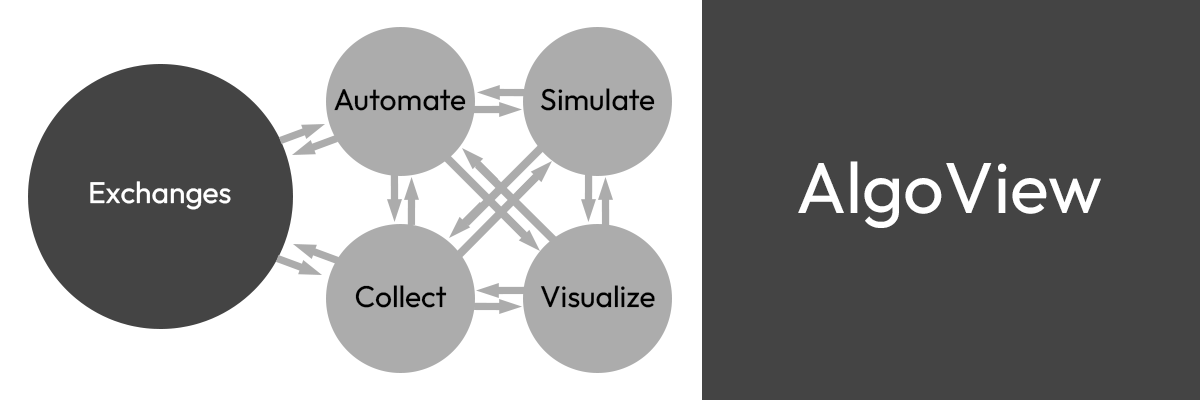
<style>
.page{position:relative;width:1200px;height:400px;background:#444444}
.page>*{position:absolute;margin:0}
.t1{font:30px "Outfit-Regular";color:#000000}
.t2{font:72px "Outfit-Regular";color:#ffffff}
.t3{font:30px "Outfit-Regular";color:#ffffff}
</style>
<div class="page">
<p class="t1" style="left:334px;top:89px;width:132px;height:22px">Automate</p>
<p class="t1" style="left:540px;top:88px;width:115px;height:23px">Simulate</p>
<p class="t2" style="left:798px;top:161px;width:303px;height:67px">AlgoView</p>
<p class="t3" style="left:90px;top:181px;width:141px;height:29px">Exchanges</p>
<p class="t1" style="left:355px;top:285px;width:92px;height:23px">Collect</p>
<p class="t1" style="left:540px;top:285px;width:115px;height:23px">Visualize</p>
</div>
